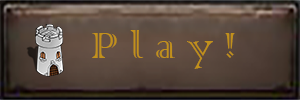
<style>
.page{position:relative;width:300px;height:100px}
.page>*{position:absolute;margin:0}
.t1{font:48px "ColonnaMT";color:#c1901b}
</style>
<div class="page">
<p class="t1" style="left:92px;top:30px;width:143px;height:39px">P l a y !</p>
</div>
